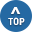
<style>
.page{position:relative;width:32px;height:32px;background:#2569a3}
.page>*{position:absolute;margin:0}
.t1{font:10px "RobotoCondensed-Bold";letter-spacing:0.025em;color:#ffffff}
.t2{font:20px "RobotoCondensed-Bold";letter-spacing:0.025em;color:#ffffff}
</style>
<div class="page">
<p class="t1" style="left:8px;top:17px;width:17px;height:8px">TOP</p>
<p class="t2" style="left:11px;top:7px;width:10px;height:7px;rotate:-90deg">&gt;</p>
</div>
